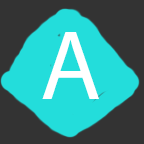
<style>
.page{position:relative;width:144px;height:144px;background:#333333}
.page>*{position:absolute;margin:0}
.t1{font:100px "MyriadPro-Regular";color:#ffffff}
</style>
<div class="page">
<p class="t1" style="left:42px;top:32px;width:57px;height:67px">A</p>
</div>
